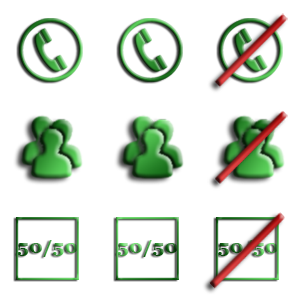
<style>
.page{position:relative;width:300px;height:300px;background:#ffffff}
.page>*{position:absolute;margin:0}
.t1{font:18.3px "Georgia-Bold";scale:1.09 1}
</style>
<div class="page">
<p class="t1" style="left:17px;top:240px;width:61px;height:17px">50/50</p>
<p class="t1" style="left:117px;top:240px;width:61px;height:17px">50/50</p>
<p class="t1" style="left:218px;top:240px;width:60px;height:17px">50/50</p>
</div>
